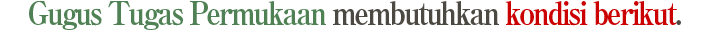
<style>
.page{position:relative;width:709px;height:31px;background:#ffffff}
.page>*{position:absolute;margin:0}
.t1{font:32px "RyuminPro-ExBold";letter-spacing:-0.08em;color:#508154;scale:0.9 1}
.t2{font:32px "RyuminPro-ExBold";letter-spacing:-0.08em;color:#4c4842;scale:0.9 1}
.t3{font:32px "RyuminPro-ExBold";letter-spacing:-0.08em;color:#cb0000;scale:0.9 1}
</style>
<div class="page">
<p class="t1" style="left:29px;top:0px;width:652px;height:30px">Gugus Tugas Permukaan<span class="t2"> membutuhkan </span><span class="t3">kondisi berikut</span><span class="t2">.</span></p>
</div>
